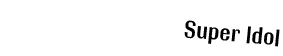
<style>
.page{position:relative;width:283px;height:56px;background:#ffffff}
.page>*{position:absolute;margin:0}
.t1{font:24px "RolloutPlain";color:#000000}
</style>
<div class="page">
<p class="t1" style="left:184px;top:20px;width:96px;height:27px;rotate:6deg">Super Idol</p>
</div>
